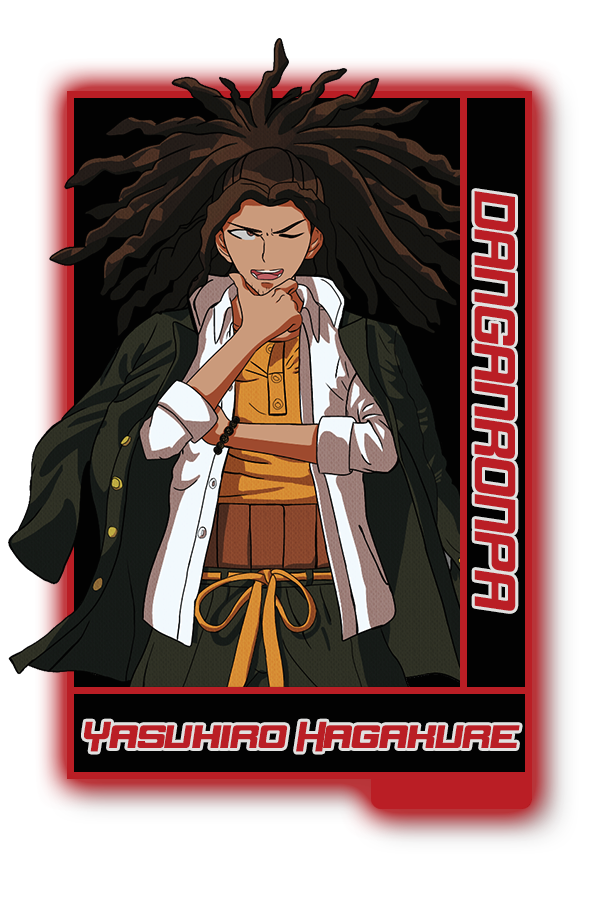
<style>
.page{position:relative;width:600px;height:900px;background:#ffffff}
.page>*{position:absolute;margin:0}
.t1{font:48.8px "DorBlue";color:#bb2c2e}
.t2{font:35.7px "DorBlue";color:#bb2c2e}
</style>
<div class="page">
<p class="t1" style="left:474px;top:191px;width:42px;height:420px;rotate:90deg">DANGANRONPA</p>
<p class="t2" style="left:84px;top:721px;width:436px;height:31px">Yasuhiro Hagakure</p>
</div>
